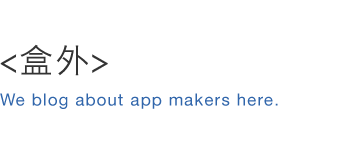
<style>
.page{position:relative;width:357px;height:155px;background:#ffffff}
.page>*{position:absolute;margin:0}
.t1{font:16.7px "HelveticaNeue";letter-spacing:0.075em;color:#3166ab}
.t2{font:33.3px "HiraginoSansGB-W3";letter-spacing:0.075em;color:#333333}
</style>
<div class="page">
<p class="t1" style="left:0px;top:44px;width:278px;height:65px"><span class="t2">&lt;盒外&gt;<br></span>We blog about app makers here.</p>
</div>
